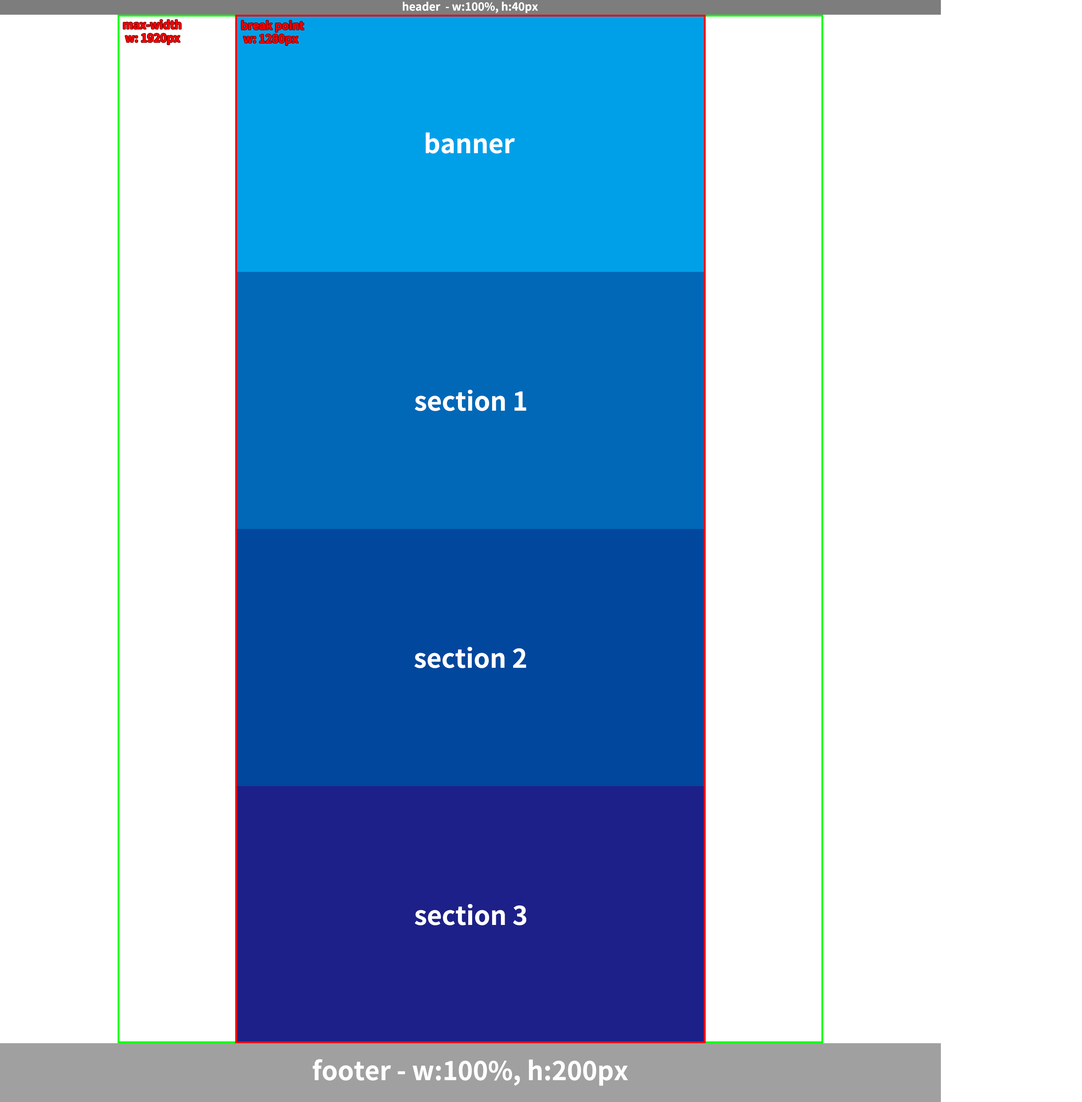
<style>
.page{position:relative;width:1082px;height:1102px;background:#ffffff}
.page>*{position:absolute;margin:0}
.t1{font:11px "NotoSansCJKkr-Bold";color:#ffffff}
.t2{font:11px "NotoSansCJKkr-Bold";color:#ff0000}
.t3{font:25.7px "NotoSansCJKkr-Bold";color:#ffffff}
</style>
<div class="page">
<p class="t1" style="left:403px;top:1px;width:135px;height:12px">header  - w:100%, h:40px</p>
<p class="t2" style="left:123px;top:20px;width:58px;height:24px">max-width<br> w: 1920px</p>
<p class="t2" style="left:241px;top:21px;width:63px;height:24px">break point<br> w: 1280px</p>
<p class="t3" style="left:425px;top:132px;width:90px;height:22px">banner</p>
<p class="t3" style="left:414px;top:390px;width:112px;height:21px">section 1</p>
<p class="t3" style="left:414px;top:647px;width:112px;height:21px">section 2</p>
<p class="t3" style="left:414px;top:904px;width:112px;height:22px">section 3</p>
<p class="t3" style="left:313px;top:1059px;width:315px;height:27px">footer - w:100%, h:200px</p>
</div>
